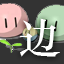
<style>
.page{position:relative;width:64px;height:64px;background:#333333}
.page>*{position:absolute;margin:0}
.t1{font:42px "STZhongsong";color:#ffffff}
</style>
<div class="page">
<p class="t1" style="left:19px;top:18px;width:41px;height:39px">边</p>
</div>
